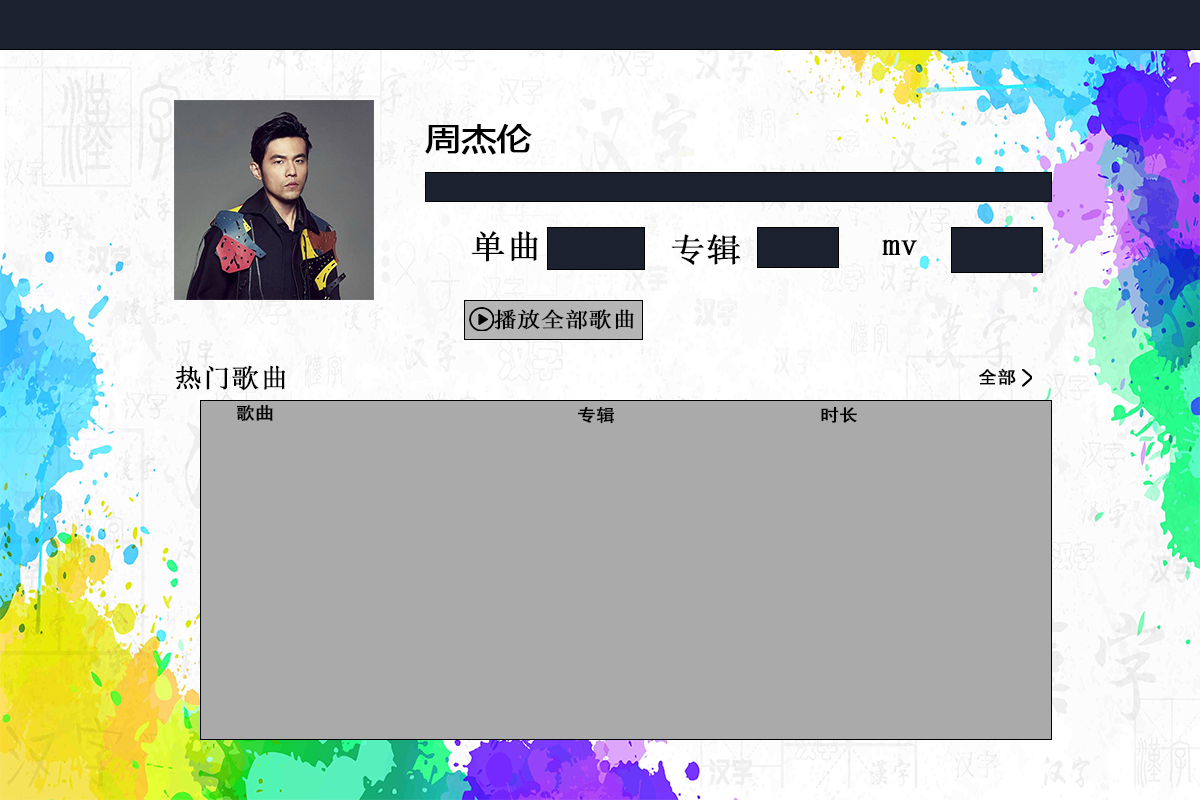
<style>
.page{position:relative;width:1200px;height:800px;background:#aaaaaa}
.page>*{position:absolute;margin:0}
.t1{font:32.4px "MicrosoftYaHei";color:#000000;font-weight:bold;scale:1.07 1}
.t2{font:32.4px "SimSun";color:#000000;font-weight:bold;scale:1.07 1}
.t3{font:21.6px "SimSun";color:#000000;font-weight:bold;scale:1.07 1}
.t4{font:25.9px "SimSun";color:#000000;font-weight:bold;scale:1.07 1}
.t5{font:17.3px "SimHei";color:#000000;font-weight:bold;scale:1.07 1}
</style>
<div class="page">
<p class="t1" style="left:425px;top:124px;width:107px;height:31px">周杰伦</p>
<p class="t2" style="left:471px;top:231px;width:67px;height:31px">单曲</p>
<p class="t2" style="left:671px;top:234px;width:70px;height:31px">专辑</p>
<p class="t2" style="left:882px;top:239px;width:35px;height:16px">mv</p>
<p class="t3" style="left:494px;top:309px;width:140px;height:21px">播放全部歌曲</p>
<p class="t4" style="left:175px;top:365px;width:110px;height:26px">热门歌曲</p>
<p class="t5" style="left:979px;top:368px;width:37px;height:18px">全部</p>
<p class="t5" style="left:236px;top:404px;width:37px;height:18px">歌曲</p>
<p class="t5" style="left:577px;top:406px;width:38px;height:18px">专辑</p>
<p class="t5" style="left:821px;top:406px;width:36px;height:17px">时长</p>
</div>
